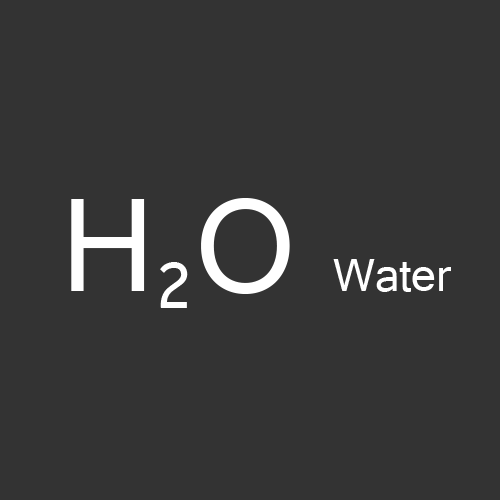
<style>
.page{position:relative;width:500px;height:500px;background:#333333}
.page>*{position:absolute;margin:0}
.t1{font:48px "Gautami";color:#ffffff}
.t2{font:140px "Gautami";color:#ffffff}
.t3{font:120px "Gautami";color:#ffffff}
</style>
<div class="page">
<p class="t1" style="left:71px;top:198px;width:380px;height:110px"><span class="t2">H</span><span class="t3">2</span><span class="t2">O </span>Water</p>
</div>
